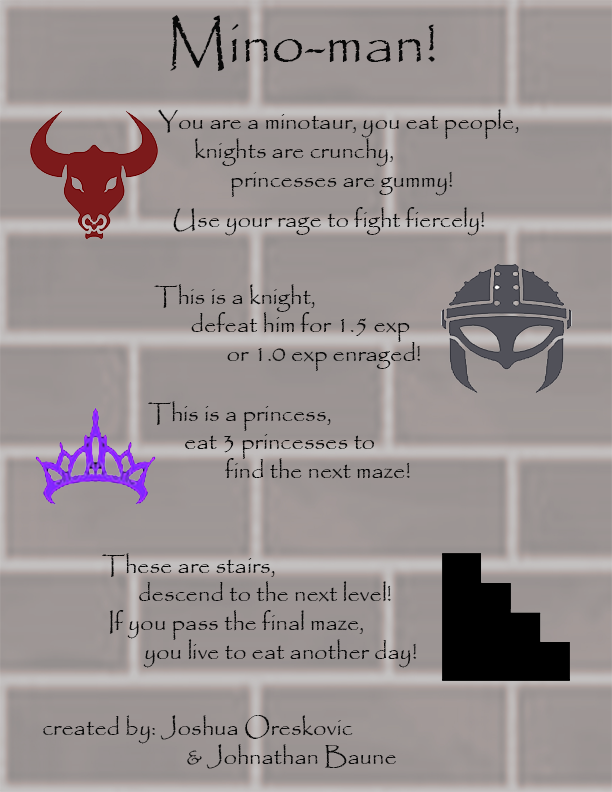
<style>
.page{position:relative;width:612px;height:792px}
.page>*{position:absolute;margin:0}
.t1{font:60px "Papyrus-Regular";color:#080808}
.t2{font:24px "Papyrus-Regular";color:#080808}
</style>
<div class="page">
<p class="t1" style="left:170px;top:15px;width:265px;height:56px">Mino-man!</p>
<p class="t2" style="left:158px;top:109px;width:361px;height:88px">You are a minotaur, you eat people,<br> knights are crunchy, <br>  princesses are gummy!</p>
<p class="t2" style="left:173px;top:207px;width:312px;height:29px">Use your rage to fight fiercely!</p>
<p class="t2" style="left:154px;top:284px;width:267px;height:87px">This is a knight,<br> defeat him for 1.5 exp<br>  or 1.0 exp enraged!</p>
<p class="t2" style="left:148px;top:401px;width:262px;height:78px">This is a princess,<br> eat 3 princesses to<br>   find the next maze!</p>
<p class="t2" style="left:102px;top:553px;width:289px;height:49px">These are stairs,<br> descend to the next level!</p>
<p class="t2" style="left:109px;top:610px;width:308px;height:58px">If you pass the final maze,<br> you live to eat another day!</p>
<p class="t2" style="left:43px;top:715px;width:353px;height:54px">created by: Joshua Oreskovic <br>    &amp; Johnathan Baune</p>
</div>
